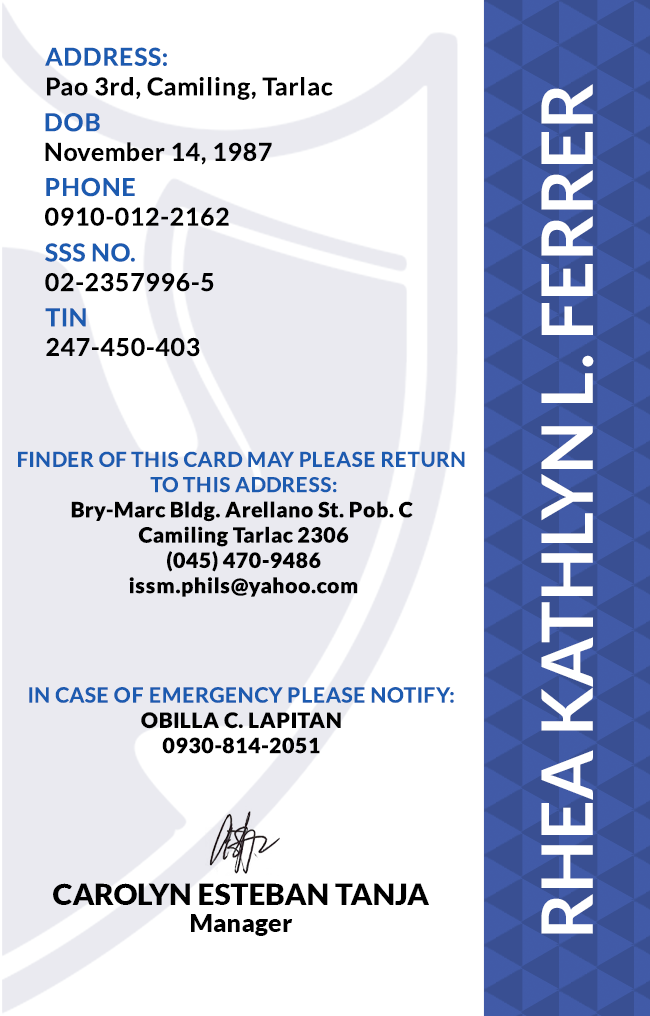
<style>
.page{position:relative;width:650px;height:1016px;background:#ffffff}
.page>*{position:absolute;margin:0}
.t1{font:24.7px/29.6px "Lato-Bold";letter-spacing:0.025em}
.t2{font:70.8px "Lato-Bold";color:#ffffff}
.t3{font:24.7px/29.6px "Lato-Bold";letter-spacing:0.025em;color:#000000}
.t4{font:21.1px "Lato-Black";letter-spacing:0.025em}
.t5{font:20.5px/25.3px "Lato-Bold";letter-spacing:0.025em;text-transform:uppercase}
.t6{font:21.1px/25.3px "Lato-Bold";letter-spacing:0.025em}
.t7{font:29.5px "Lato-Black";color:#000000}
.t8{font:25px "Lato-Black";color:#000000}
</style>
<div class="page">
<p class="t1" style="left:45px;top:47px;width:288px;height:53px">ADDRESS:<br>Pao 3rd, Camiling, Tarlac</p>
<p class="t2" style="left:541px;top:84px;width:53px;height:850px;rotate:-90deg">RHEA KATHLYN L. FERRER</p>
<p class="t3" style="left:45px;top:113px;width:227px;height:52px">DOB<br>November 14, 1987</p>
<p class="t1" style="left:45px;top:177px;width:184px;height:49px">PHONE <br>0910-012-2162</p>
<p class="t1" style="left:45px;top:243px;width:169px;height:49px">SSS NO.<br>02-2357996-5</p>
<p class="t3" style="left:45px;top:308px;width:155px;height:49px">TIN<br>247-450-403</p>
<p class="t4" style="left:18px;top:451px;width:447px;height:146px;text-align:center"><span class="t5">Finder of this card may please return <br>to this address:<br></span>Bry-Marc Bldg. Arellano St. Pob. C <br>Camiling Tarlac 2306<br>(045) 470-9486<br>issm.phils@yahoo.com</p>
<p class="t6" style="left:29px;top:687px;width:425px;height:67px;text-align:center">IN CASE OF EMERGENCY PLEASE NOTIFY:<br><span class="t4">OBILLA C. LAPITAN<br>0930-814-2051</span></p>
<p class="t7" style="left:53px;top:883px;width:376px;height:22px">CAROLYN ESTEBAN TANJA</p>
<p class="t8" style="left:191px;top:914px;width:102px;height:22px">Manager</p>
</div>
